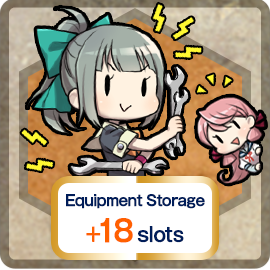
<style>
.page{position:relative;width:270px;height:270px}
.page>*{position:absolute;margin:0}
.t1{font:15px "GothicMB101Pro-Medium";letter-spacing:-0.04em;color:#001d59;font-weight:bold;scale:0.9 1}
.t2{font:20px "GothicMB101Pro-Medium";letter-spacing:-0.04em;color:#ff6000;font-weight:bold;scale:0.9 1}
.t3{font:30px "GothicMB101Pro-Medium";letter-spacing:-0.04em;color:#ff6000;font-weight:bold;scale:0.9 1}
.t4{font:20px "GothicMB101Pro-Medium";letter-spacing:-0.04em;color:#001d59;font-weight:bold;scale:0.9 1}
</style>
<div class="page">
<p class="t1" style="left:66px;top:194px;width:139px;height:49px;text-align:center">Equipment Storage<br><span class="t2">+</span><span class="t3">18 </span><span class="t4">slots</span></p>
</div>
